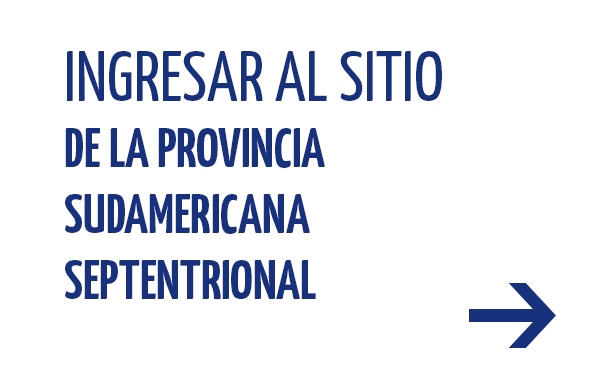
<style>
.page{position:relative;width:600px;height:372px;background:#ffffff}
.page>*{position:absolute;margin:0}
.t1{font:55px "YanoneKaffeesatz-Bold";color:#17317c}
.t2{font:70px "YanoneKaffeesatz-Regular";color:#17317c}
</style>
<div class="page">
<p class="t1" style="left:65px;top:51px;width:377px;height:249px"><span class="t2">INGRESAR AL SITIO <br></span>DE LA PROVINCIA <br>SUDAMERICANA<br>SEPTENTRIONAL</p>
</div>
